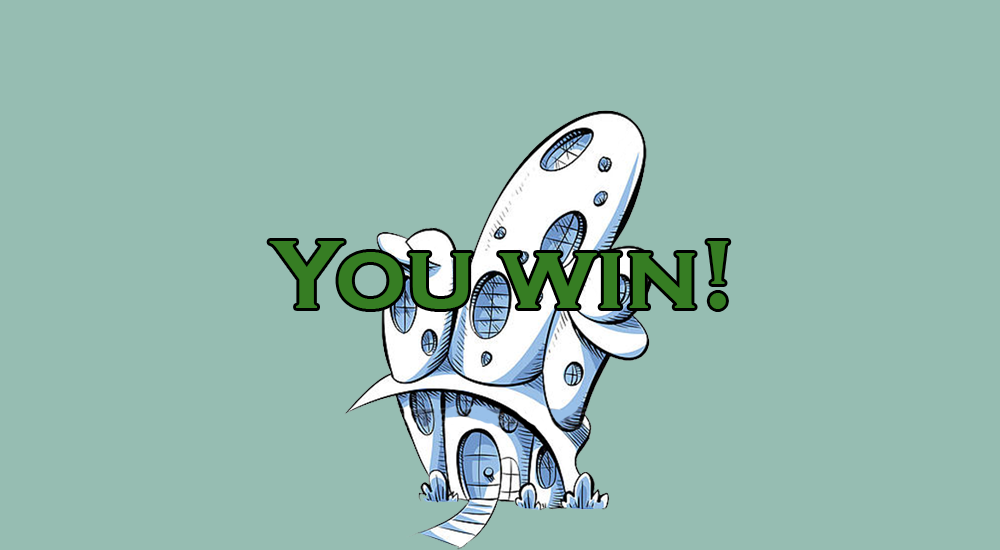
<style>
.page{position:relative;width:1000px;height:550px;background:#96bdb2}
.page>*{position:absolute;margin:0}
.t1{font:100px "CopperplateGothic-Bold";color:#367d23}
</style>
<div class="page">
<p class="t1" style="left:269px;top:241px;width:460px;height:68px">You win!</p>
</div>
